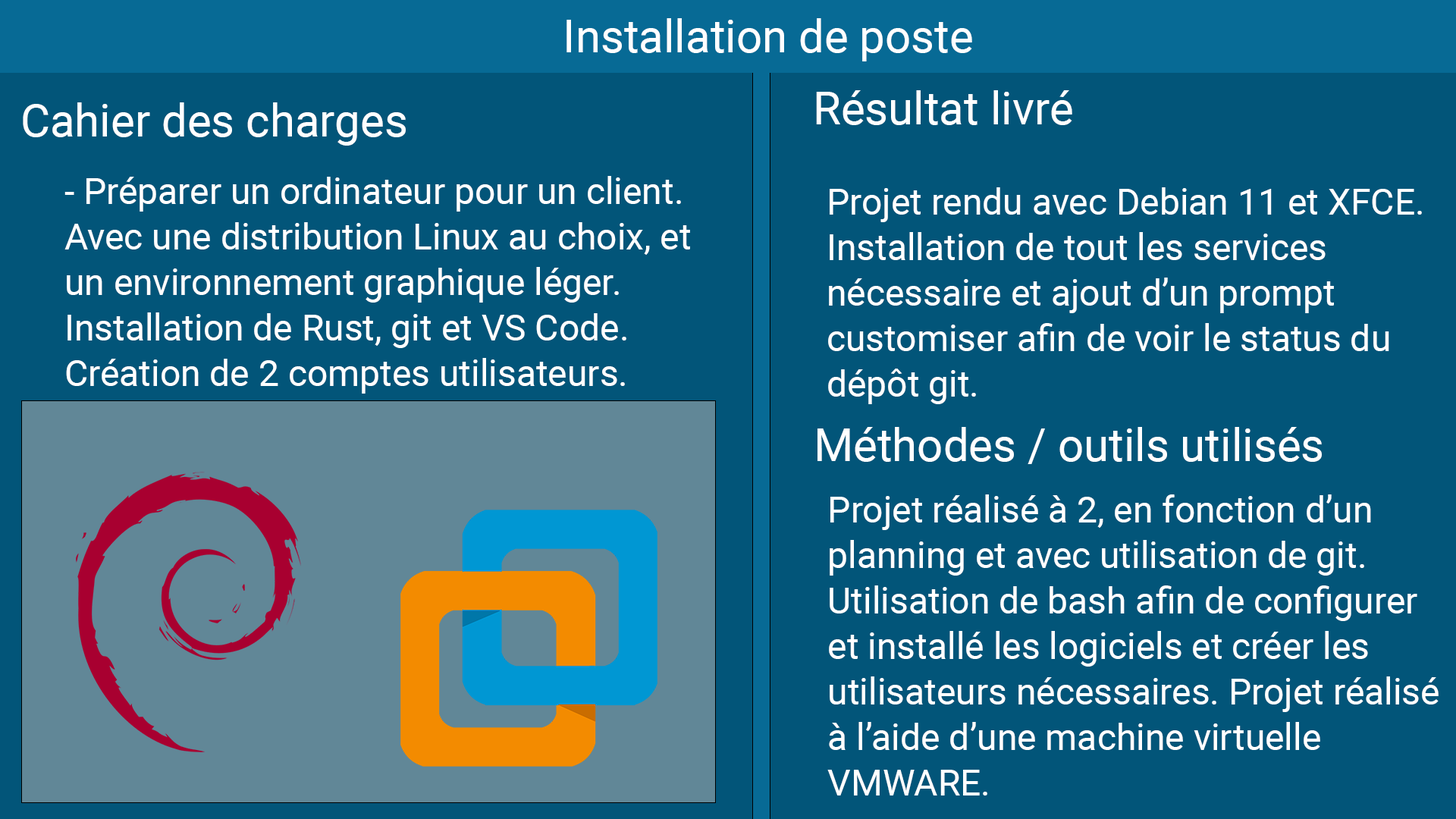
<style>
.page{position:relative;width:1456px;height:819px;background:#025579}
.page>*{position:absolute;margin:0}
.t1{font:45.5px "Roboto-Regular";color:#ffffff}
.t2{font:36.4px/45.5px "Roboto-Regular";color:#ffffff}
</style>
<div class="page">
<p class="t1" style="left:566px;top:18px;width:406px;height:43px">Installation de poste</p>
<p class="t1" style="left:816px;top:90px;width:256px;height:35px">Résultat livré</p>
<p class="t1" style="left:23px;top:102px;width:383px;height:44px">Cahier des charges</p>
<p class="t2" style="left:64px;top:176px;width:626px;height:218px">- Préparer un ordinateur pour un client.<br>Avec une distribution Linux au choix, et<br>un environnement graphique léger.<br>Installation de Rust, git et VS Code. <br>Création de 2 comptes utilisateurs.</p>
<p class="t2" style="left:828px;top:187px;width:594px;height:217px">Projet rendu avec Debian 11 et XFCE.<br>Installation de tout les services <br>nécessaire et ajout d’un prompt<br>customiser afin de voir le status du <br>dépôt git.</p>
<p class="t1" style="left:817px;top:427px;width:505px;height:37px">Méthodes / outils utilisés</p>
<p class="t2" style="left:827px;top:494px;width:612px;height:301px">Projet réalisé à 2, en fonction d’un<br>planning et avec utilisation de git.<br>Utilisation de bash afin de configurer<br>et installé les logiciels et créer les <br>utilisateurs nécessaires. Projet réalisé<br>à l’aide d’une machine virtuelle <br>VMWARE.</p>
</div>
